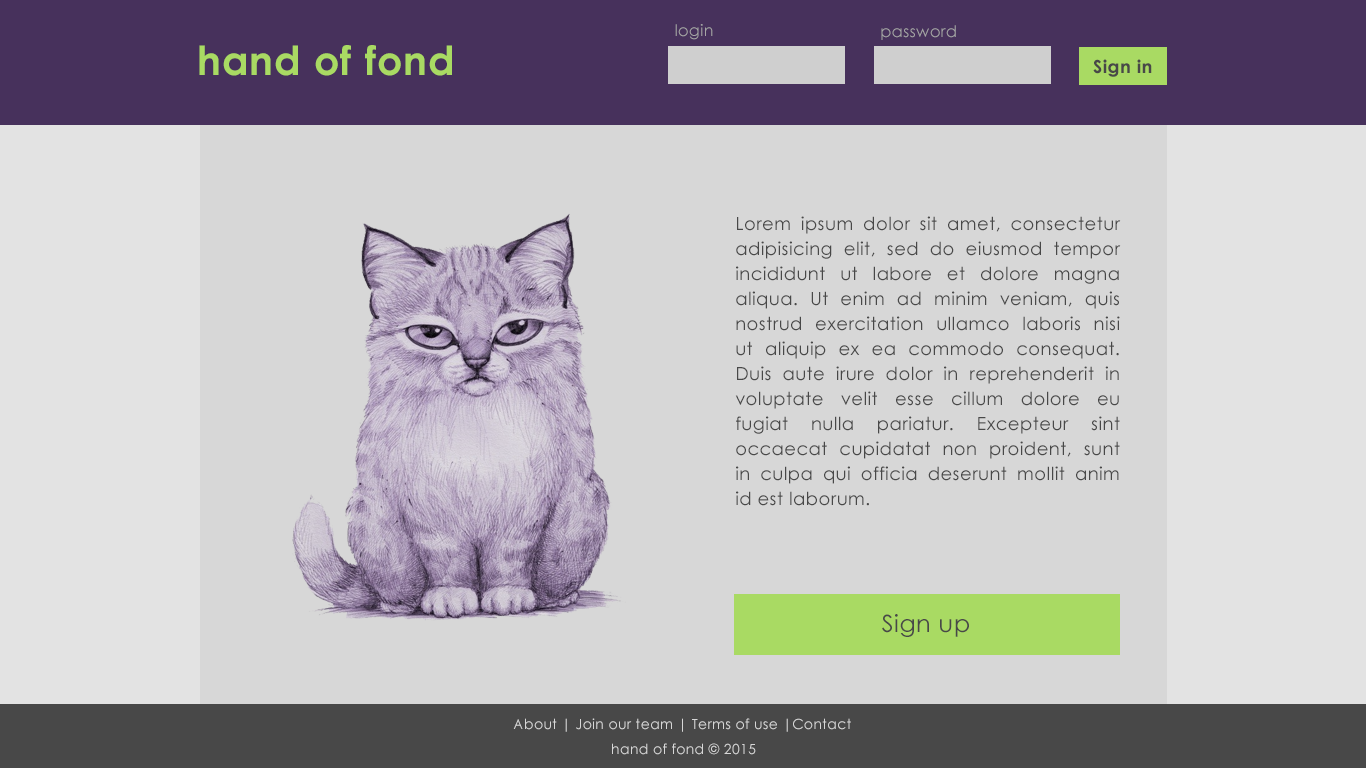
<style>
.page{position:relative;width:1366px;height:768px;background:#d7d7d7}
.page>*{position:absolute;margin:0}
.t1{font:16px "CenturyGothic";letter-spacing:0.025em;color:#a6a6a6}
.t2{font:40px "CenturyGothic-Bold";letter-spacing:0.025em;color:#a9da63}
.t3{font:18px "CenturyGothic-Bold";letter-spacing:0.025em;color:#484848}
.t4{font:18px/25px "CenturyGothic";letter-spacing:0.025em;color:#484848}
.t5{font:24px "CenturyGothic";letter-spacing:0.025em;color:#484848}
.t6{font:14px "CenturyGothic";letter-spacing:0.025em;color:#d7d7d7}
</style>
<div class="page">
<p class="t1" style="left:675px;top:24px;width:38px;height:16px">login</p>
<p class="t1" style="left:881px;top:25px;width:75px;height:15px">password</p>
<p class="t2" style="left:199px;top:45px;width:253px;height:31px">hand of fond</p>
<p class="t3" style="left:1093px;top:59px;width:59px;height:18px">Sign in</p>
<p class="t4" style="left:735px;top:216px;width:386px;height:290px;text-align:justify">Lorem ipsum dolor sit amet, consectetur <br>adipisicing elit, sed do eiusmod tempor <br>incididunt ut labore et dolore magna <br>aliqua. Ut enim ad minim veniam, quis <br>nostrud exercitation ullamco laboris nisi <br>ut aliquip ex ea commodo consequat. <br>Duis aute irure dolor in reprehenderit in <br>voluptate velit esse cillum dolore eu <br>fugiat nulla pariatur. Excepteur sint <br>occaecat cupidatat non proident, sunt<br>in culpa qui officia deserunt mollit anim <br>id est laborum.</p>
<p class="t5" style="left:882px;top:614px;width:87px;height:23px">Sign up</p>
<p class="t6" style="left:513px;top:718px;width:338px;height:14px">About | Join our team | Terms of use |Contact</p>
<p class="t6" style="left:612px;top:743px;width:144px;height:12px">hand of fond © 2015</p>
</div>
